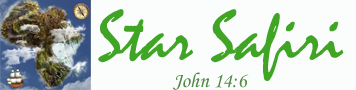
<style>
.page{position:relative;width:356px;height:90px;background:#fbfcfc}
.page>*{position:absolute;margin:0}
.t1{font:72px "Mistral";color:#40a525}
.t2{font:21px "MonotypeCorsiva";color:#528a43}
</style>
<div class="page">
<p class="t1" style="left:98px;top:9px;width:246px;height:72px">Star Safiri</p>
<p class="t2" style="left:173px;top:72px;width:76px;height:18px">John 14:6</p>
</div>
